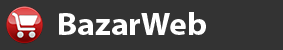
<style>
.page{position:relative;width:283px;height:50px;background:#333333}
.page>*{position:absolute;margin:0}
.t1{font:32.2px "MyriadPro-Bold";color:#ffffff;scale:1.04 1}
</style>
<div class="page">
<p class="t1" style="left:59px;top:12px;width:147px;height:23px">BazarWeb</p>
</div>
